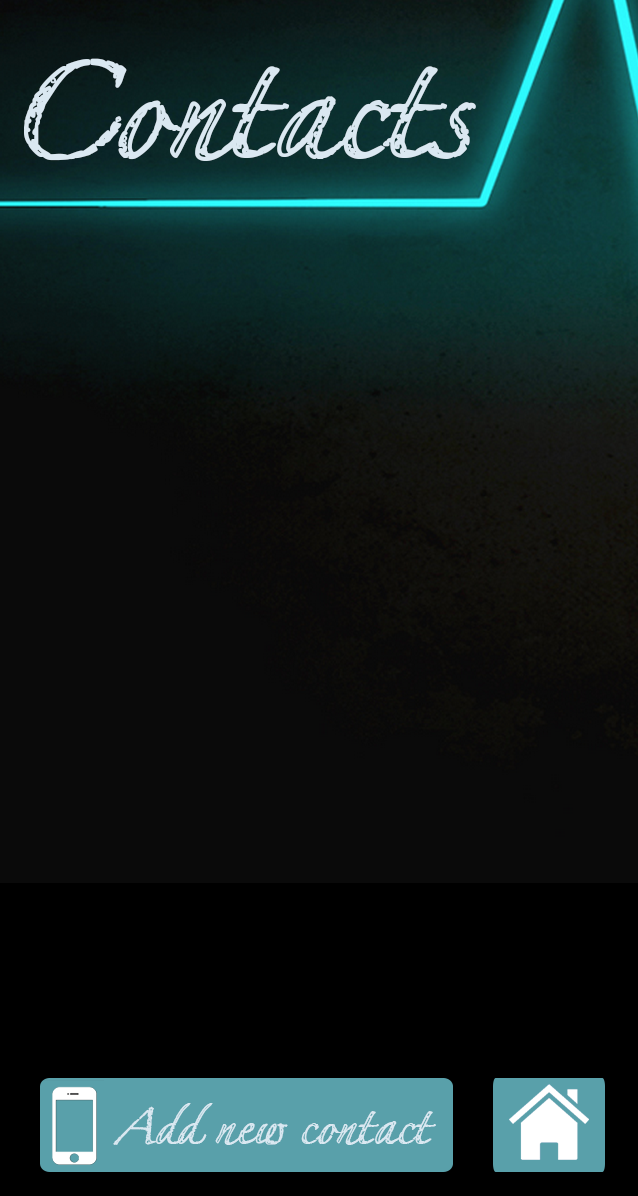
<style>
.page{position:relative;width:638px;height:1196px;background:#0a0a0a}
.page>*{position:absolute;margin:0}
.t1{font:200px "CFMyBestFriend-Regular";color:#dae8f1}
.t2{font:72px "CFMyBestFriend-Regular";color:#dae8f1}
</style>
<div class="page">
<p class="t1" style="left:24px;top:58px;width:452px;height:103px">Contacts</p>
<p class="t2" style="left:113px;top:1103px;width:323px;height:42px">Add new contact</p>
</div>
